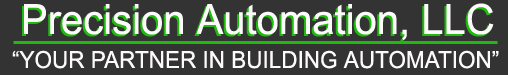
<style>
.page{position:relative;width:508px;height:75px;background:#333333}
.page>*{position:absolute;margin:0}
.t1{font:41.7px "ArialMT";scale:0.96 1}
.t2{font:41.7px "ArialMT";color:#fdfafa;scale:0.96 1}
.t3{font:23.4px "ArialMT";color:#fdfafa;scale:0.96 1}
</style>
<div class="page">
<p class="t1" style="left:22px;top:5px;width:470px;height:37px">Precision Automation, LLC</p>
<p class="t2" style="left:24px;top:3px;width:470px;height:37px">Precision Automation, LLC</p>
<p class="t3" style="left:12px;top:50px;width:487px;height:19px">“YOUR PARTNER IN BUILDING AUTOMATION”</p>
</div>
